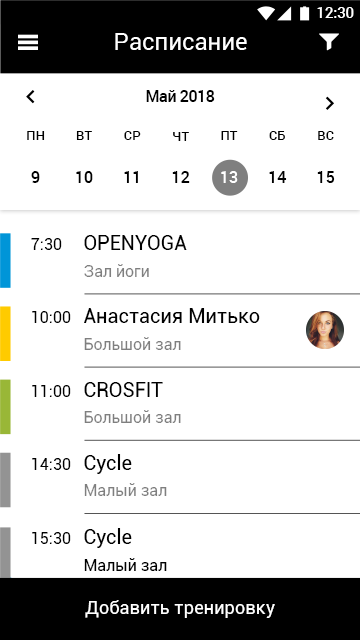
<style>
.page{position:relative;width:360px;height:640px;background:#ffffff}
.page>*{position:absolute;margin:0}
.t1{font:14.7px "Roboto-Medium";color:#ffffff}
.t2{font:24px "Roboto-Regular";color:#ffffff}
.t3{font:16px "Roboto-Medium";letter-spacing:-0.023em;color:#000000}
.t4{font:13.3px "Roboto-Medium";color:#000000}
.t5{font:16px "Roboto-Medium";color:#000000}
.t6{font:16px "Roboto-Medium";color:#ffffff}
.t7{font:16px "Roboto-Regular";color:#000000}
.t8{font:20px "Roboto-Regular";color:#000000}
.t9{font:16px "Roboto-Regular";color:#7f7f7f}
.t10{font:18.3px "Roboto-Regular";color:#ffffff}
</style>
<div class="page">
<p class="t1" style="left:317px;top:7px;width:37px;height:11px">12:30</p>
<p class="t2" style="left:115px;top:33px;width:132px;height:17px">Расписание</p>
<p class="t3" style="left:146px;top:90px;width:69px;height:12px">Май 2018</p>
<p class="t4" style="left:27px;top:131px;width:18px;height:9px">ПН</p>
<p class="t4" style="left:76px;top:131px;width:16px;height:9px">ВТ</p>
<p class="t4" style="left:124px;top:131px;width:17px;height:9px">СР</p>
<p class="t4" style="left:173px;top:132px;width:16px;height:9px">ЧТ</p>
<p class="t4" style="left:221px;top:131px;width:17px;height:9px">ПТ</p>
<p class="t4" style="left:269px;top:131px;width:16px;height:9px">СБ</p>
<p class="t4" style="left:318px;top:131px;width:16px;height:9px">ВС</p>
<p class="t5" style="left:31px;top:171px;width:9px;height:12px">9</p>
<p class="t5" style="left:76px;top:171px;width:17px;height:12px">10</p>
<p class="t5" style="left:124px;top:171px;width:14px;height:12px">11</p>
<p class="t5" style="left:172px;top:171px;width:18px;height:12px">12</p>
<p class="t6" style="left:221px;top:171px;width:17px;height:12px">13</p>
<p class="t5" style="left:269px;top:171px;width:18px;height:12px">14</p>
<p class="t5" style="left:317px;top:171px;width:18px;height:12px">15</p>
<p class="t7" style="left:31px;top:238px;width:31px;height:12px">7:30</p>
<p class="t8" style="left:84px;top:235px;width:103px;height:15px">OPENYOGA</p>
<p class="t9" style="left:84px;top:264px;width:65px;height:13px">Зал йоги</p>
<p class="t7" style="left:32px;top:311px;width:39px;height:12px">10:00</p>
<p class="t8" style="left:84px;top:308px;width:176px;height:15px">Анастасия Митько</p>
<p class="t9" style="left:84px;top:337px;width:97px;height:13px">Большой зал</p>
<p class="t7" style="left:32px;top:385px;width:39px;height:12px">11:00</p>
<p class="t8" style="left:84px;top:382px;width:79px;height:15px">CROSFIT</p>
<p class="t9" style="left:84px;top:410px;width:97px;height:13px">Большой зал</p>
<p class="t7" style="left:32px;top:458px;width:39px;height:12px">14:30</p>
<p class="t8" style="left:84px;top:454px;width:48px;height:20px">Cycle</p>
<p class="t9" style="left:84px;top:483px;width:83px;height:13px">Малый зал</p>
<p class="t7" style="left:32px;top:532px;width:39px;height:12px">15:30</p>
<p class="t8" style="left:84px;top:528px;width:48px;height:20px">Cycle</p>
<p class="t7" style="left:84px;top:558px;width:83px;height:13px">Малый зал</p>
<p class="t10" style="left:85px;top:600px;width:190px;height:18px">Добавить тренировку</p>
</div>
